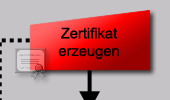
<style>
.page{position:relative;width:170px;height:100px;background:#c6c3c6}
.page>*{position:absolute;margin:0}
.t1{font:14.7px "ArialMT";color:#000000}
</style>
<div class="page">
<p class="t1" style="left:58px;top:27px;width:61px;height:33px;text-align:center">Zertifikat<br>erzeugen</p>
</div>
